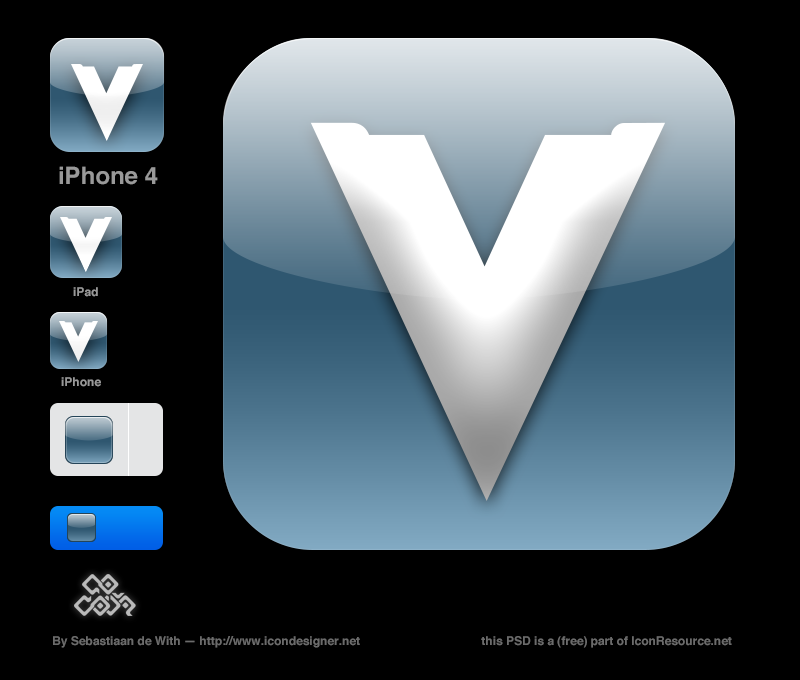
<style>
.page{position:relative;width:800px;height:680px;background:#000000}
.page>*{position:absolute;margin:0}
.t1{font:24px "Helvetica-Bold";color:#999999}
.t2{font:12px "Helvetica-Bold";color:#999999}
.t3{font:12px "Helvetica-Bold";color:#6b6b6b}
</style>
<div class="page">
<p class="t1" style="left:59px;top:166px;width:99px;height:19px">iPhone 4</p>
<p class="t2" style="left:73px;top:287px;width:25px;height:10px">iPad</p>
<p class="t2" style="left:61px;top:377px;width:40px;height:10px">iPhone</p>
<p class="t3" style="left:53px;top:636px;width:679px;height:12px">By Sebastiaan de With — http://www.icondesigner.net              this PSD is a (free) part of IconResource.net</p>
</div>
